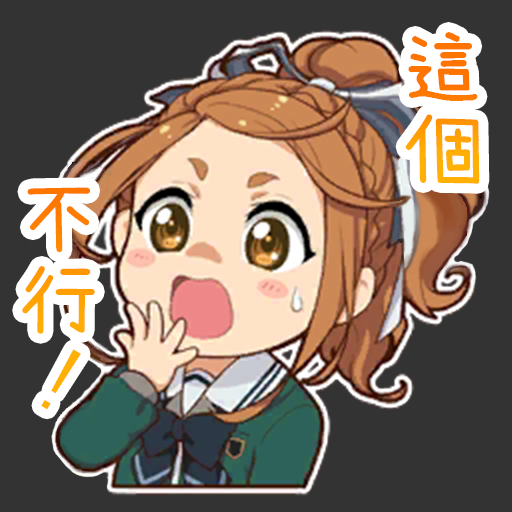
<style>
.page{position:relative;width:512px;height:512px;background:#333333}
.page>*{position:absolute;margin:0}
.t1{font:80px "SetoFont"}
.t2{font:80px "MS-Gothic";color:#ffb005}
</style>
<div class="page">
<p class="t1" style="left:405px;top:32px;width:75px;height:152px">這個</p>
<p class="t1" style="left:22px;top:187px;width:73px;height:147px">不行</p>
<p class="t2" style="left:41px;top:349px;width:40px;height:61px;rotate:-60deg">!</p>
</div>
